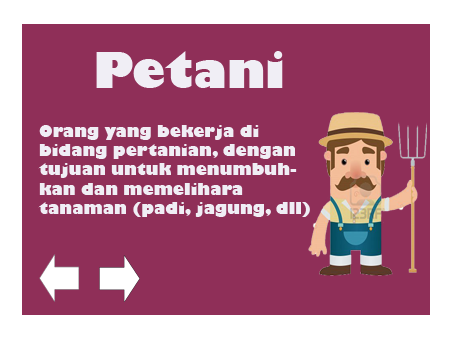
<style>
.page{position:relative;width:454px;height:340px;background:#8f2f58}
.page>*{position:absolute;margin:0}
.t1{font:48px "GillSans-UltraBold";color:#f0eef5}
.t2{font:16px "GillSans-UltraBold";color:#f0eef5}
</style>
<div class="page">
<p class="t1" style="left:96px;top:51px;width:187px;height:37px">Petani</p>
<p class="t2" style="left:38px;top:125px;width:272px;height:92px">Orang yang bekerja di<br>bidang pertanian, dengan<br>tujuan untuk menumbuh-<br>kan dan memelihara <br>tanaman (padi, jagung, dll)</p>
</div>
